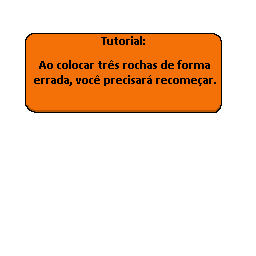
<style>
.page{position:relative;width:256px;height:256px;background:#ffffff}
.page>*{position:absolute;margin:0}
.t1{font:12.5px "Calibri-Bold";color:#000000}
</style>
<div class="page">
<p class="t1" style="left:101px;top:36px;width:44px;height:9px">Tutorial:</p>
<p class="t1" style="left:34px;top:60px;width:182px;height:26px;text-align:center">Ao colocar três rochas de forma errada, você precisará recomeçar.</p>
</div>
